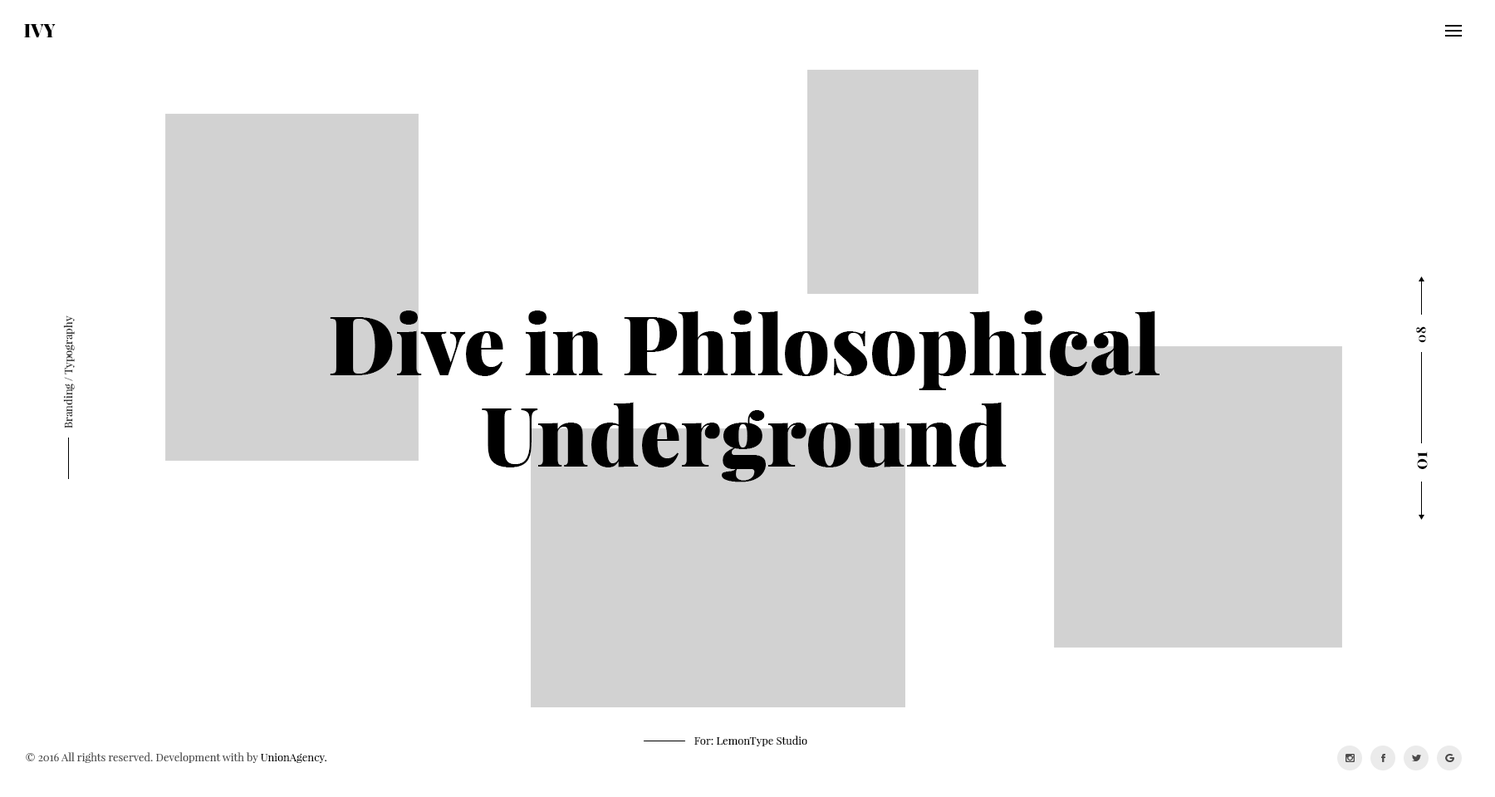
<style>
.page{position:relative;width:1495px;height:797px;background:#ffffff}
.page>*{position:absolute;margin:0}
.t1{font:18.3px "PlayfairDisplay-Black";color:#000000}
.t2{font:10.6px "PlayfairDisplay-Regular";color:#000000}
.t3{font:83.1px/91.4px "PlayfairDisplay-Black";color:#000000}
.t4{font:13.2px "PlayfairDisplay-Bold";color:#000000}
.t5{font:18.2px "PlayfairDisplay-Bold";color:#000000}
.t6{font:10.8px "PlayfairDisplay-Regular";color:#000000}
.t7{font:10.8px "PlayfairDisplay-Regular";color:#494949}
</style>
<div class="page">
<p class="t1" style="left:24px;top:24px;width:32px;height:13px">IVY</p>
<p class="t2" style="left:63px;top:316px;width:12px;height:113px;rotate:-90deg">Branding / Typography</p>
<p class="t3" style="left:330px;top:311px;width:830px;height:172px;text-align:center">Dive in Philosophical<br>Underground</p>
<p class="t4" style="left:1416px;top:326px;width:10px;height:17px;rotate:-90deg">08</p>
<p class="t5" style="left:1417px;top:452px;width:11px;height:17px;rotate:-90deg">01</p>
<p class="t6" style="left:694px;top:736px;width:113px;height:11px">For: LemonType Studio</p>
<p class="t7" style="left:26px;top:753px;width:301px;height:10px">© 2016 All rights reserved. Development with by <span class="t6">UnionAgency.</span></p>
</div>
